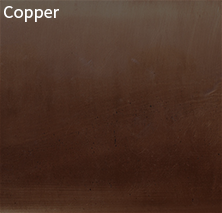
<style>
.page{position:relative;width:222px;height:213px}
.page>*{position:absolute;margin:0}
.t1{font:16px "NotoSansCJKkr-Regular";color:#ffffff}
</style>
<div class="page">
<p class="t1" style="left:4px;top:6px;width:55px;height:16px">Copper</p>
</div>
